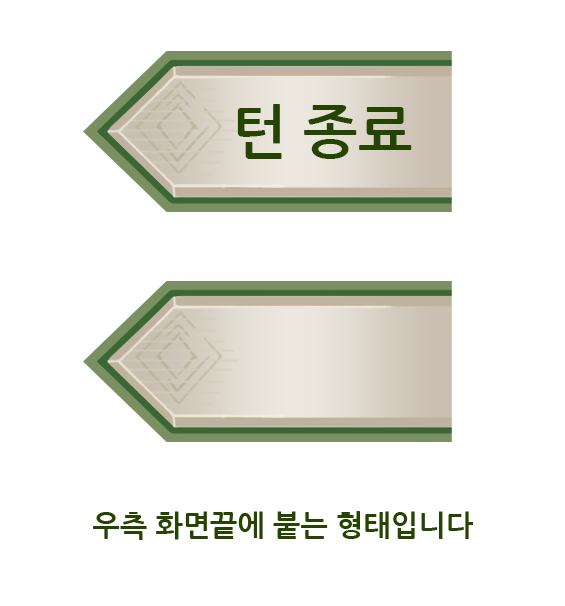
<style>
.page{position:relative;width:565px;height:606px;background:#ffffff}
.page>*{position:absolute;margin:0}
.t1{font:58.3px "NanumGothicBold";color:#254402}
.t2{font:29.2px "NanumGothicBold";color:#254402}
</style>
<div class="page">
<p class="t1" style="left:237px;top:104px;width:175px;height:55px">턴 종료</p>
<p class="t2" style="left:93px;top:511px;width:380px;height:29px">우측 화면끝에 붙는 형태입니다</p>
</div>
